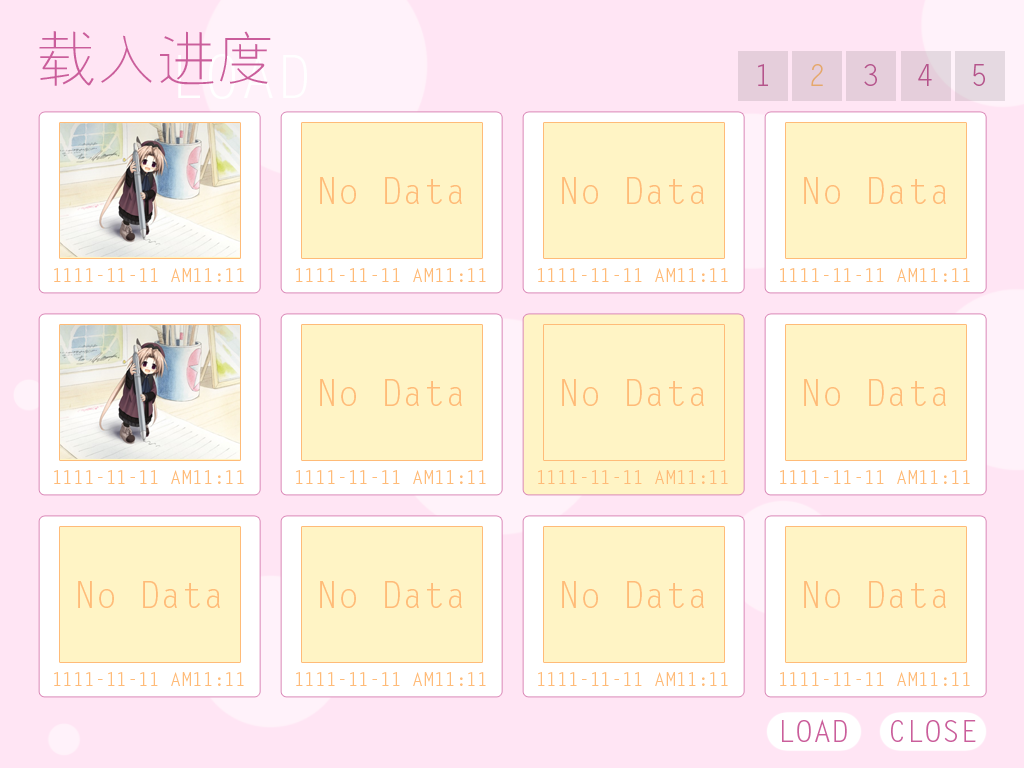
<style>
.page{position:relative;width:1024px;height:768px;background:#fff4c5}
.page>*{position:absolute;margin:0}
.t1{font:60px "FZYXJW--GB1-0";color:#ca5e9b}
.t2{font:30px "LetterGothicStd";color:#ca5e9b}
.t3{font:30px "LetterGothicStd";color:#ffbb78}
.t4{font:36px "LetterGothicStd";color:#ffbb78}
.t5{font:18px "LetterGothicStd";color:#ffbb78}
</style>
<div class="page">
<p class="t1" style="left:39px;top:31px;width:232px;height:55px">载入进度</p>
<p class="t2" style="left:758px;top:64px;width:227px;height:22px">1  <span class="t3">2</span>  3  4  5</p>
<p class="t4" style="left:320px;top:177px;width:142px;height:27px">No Data</p>
<p class="t4" style="left:562px;top:177px;width:142px;height:27px">No Data</p>
<p class="t4" style="left:804px;top:177px;width:142px;height:27px">No Data</p>
<p class="t5" style="left:54px;top:268px;width:190px;height:14px">1111-11-11 AM11:11</p>
<p class="t5" style="left:296px;top:268px;width:190px;height:14px">1111-11-11 AM11:11</p>
<p class="t5" style="left:538px;top:268px;width:190px;height:14px">1111-11-11 AM11:11</p>
<p class="t5" style="left:780px;top:268px;width:190px;height:14px">1111-11-11 AM11:11</p>
<p class="t4" style="left:320px;top:379px;width:142px;height:27px">No Data</p>
<p class="t4" style="left:562px;top:379px;width:142px;height:27px">No Data</p>
<p class="t4" style="left:804px;top:379px;width:142px;height:27px">No Data</p>
<p class="t5" style="left:54px;top:470px;width:190px;height:14px">1111-11-11 AM11:11</p>
<p class="t5" style="left:296px;top:470px;width:190px;height:14px">1111-11-11 AM11:11</p>
<p class="t5" style="left:538px;top:470px;width:190px;height:14px">1111-11-11 AM11:11</p>
<p class="t5" style="left:780px;top:470px;width:190px;height:14px">1111-11-11 AM11:11</p>
<p class="t4" style="left:78px;top:581px;width:142px;height:27px">No Data</p>
<p class="t4" style="left:320px;top:581px;width:142px;height:27px">No Data</p>
<p class="t4" style="left:562px;top:581px;width:142px;height:27px">No Data</p>
<p class="t4" style="left:804px;top:581px;width:142px;height:27px">No Data</p>
<p class="t5" style="left:54px;top:672px;width:190px;height:14px">1111-11-11 AM11:11</p>
<p class="t5" style="left:296px;top:672px;width:190px;height:14px">1111-11-11 AM11:11</p>
<p class="t5" style="left:538px;top:672px;width:190px;height:14px">1111-11-11 AM11:11</p>
<p class="t5" style="left:780px;top:672px;width:190px;height:14px">1111-11-11 AM11:11</p>
<p class="t2" style="left:782px;top:719px;width:65px;height:23px">LOAD</p>
<p class="t2" style="left:891px;top:720px;width:85px;height:22px">CLOSE</p>
</div>
